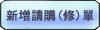
<style>
.page{position:relative;width:100px;height:30px}
.page>*{position:absolute;margin:0}
.t1{font:12px "DFHei-Bd-HK-BF";letter-spacing:0.05em;color:#424363}
</style>
<div class="page">
<p class="t1" style="left:6px;top:9px;width:88px;height:12px">新增請購(修)單</p>
</div>
